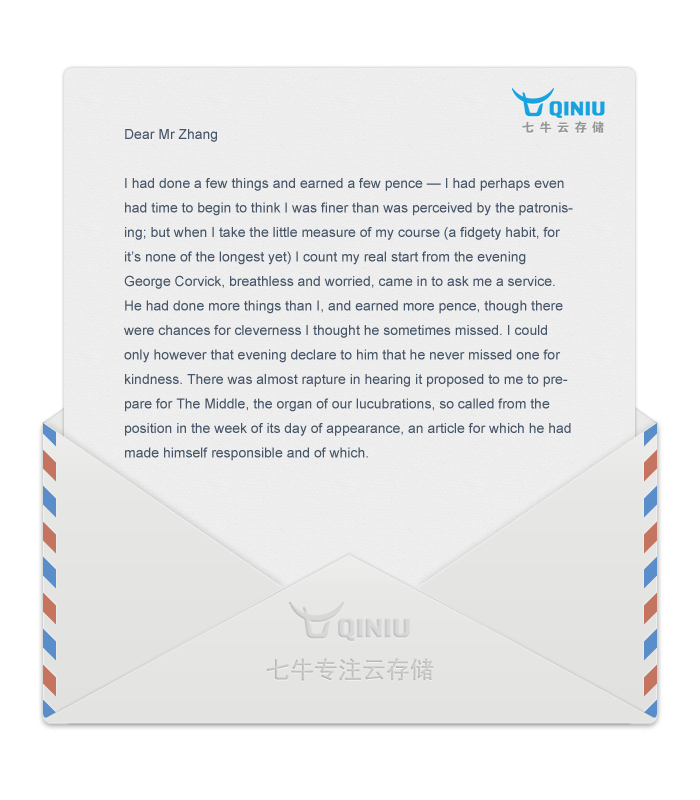
<style>
.page{position:relative;width:700px;height:800px;background:#ffffff}
.page>*{position:absolute;margin:0}
.t1{font:14px "ArialMT";color:#465567}
.t2{font:24px "SimHei";color:#c4c4c4}
</style>
<div class="page">
<p class="t1" style="left:124px;top:129px;width:449px;height:332px">Dear Mr Zhang<br><br>I had done a few things and earned a few pence — I had perhaps even had time to begin to think I was finer than was perceived by the patronising; but when I take the little measure of my course (a fidgety habit, for it’s none of the longest yet) I count my real start from the evening George Corvick, breathless and worried, came in to ask me a service. He had done more things than I, and earned more pence, though there were chances for cleverness I thought he sometimes missed. I could only however that evening declare to him that he never missed one for kindness. There was almost rapture in hearing it proposed to me to prepare for The Middle, the organ of our lucubrations, so called from the position in the week of its day of appearance, an article for which he had made himself responsible and of which.</p>
<p class="t2" style="left:266px;top:658px;width:168px;height:23px">七牛专注云存储</p>
</div>
